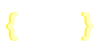
<style>
.page{position:relative;width:100px;height:50px;background:#ffffff}
.page>*{position:absolute;margin:0}
.t1{font:29.9px "CenturyGothic-Bold";color:#fff056}
.t2{font:29.9px "CenturyGothic-Bold";color:#ffffb8}
</style>
<div class="page">
<p class="t1" style="left:6px;top:12px;width:10px;height:29px">{</p>
<p class="t2" style="left:8px;top:12px;width:10px;height:29px">{</p>
<p class="t1" style="left:81px;top:12px;width:11px;height:29px">}</p>
<p class="t2" style="left:83px;top:12px;width:11px;height:29px">}</p>
</div>
